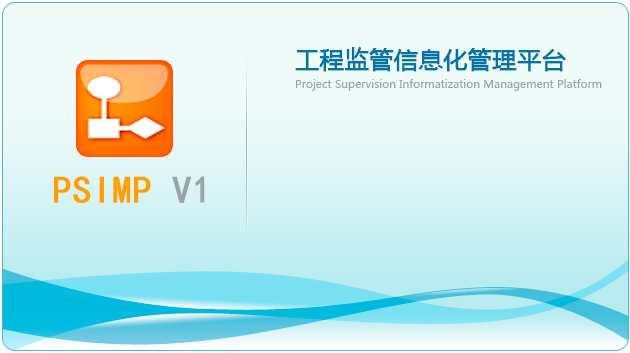
<style>
.page{position:relative;width:630px;height:353px;background:#effbf8}
.page>*{position:absolute;margin:0}
.t1{font:24px "MicrosoftYaHei";color:#0074a6;font-weight:bold}
.t2{font:11px "MicrosoftYaHei";color:#9aa5a9}
.t3{font:38px "SimHei";color:#ffa000;font-weight:bold}
.t4{font:38px "SimHei";color:#9aa5a9;font-weight:bold}
</style>
<div class="page">
<p class="t1" style="left:295px;top:47px;width:271px;height:25px">工程监管信息化管理平台</p>
<p class="t2" style="left:296px;top:79px;width:306px;height:12px">Project Supervision Informatization Management Platform</p>
<p class="t3" style="left:54px;top:176px;width:151px;height:27px">PSIMP<span class="t4"> V1</span></p>
</div>
